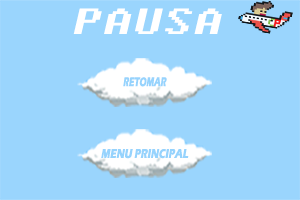
<style>
.page{position:relative;width:300px;height:200px;background:#9ad5fd}
.page>*{position:absolute;margin:0}
.t1{font:36.4px "Fixedsys";color:#ffffff;font-style:italic;scale:1.33 1}
.t2{font:13.1px "ErasITC-Bold";color:#96d3fd;font-style:italic;scale:0.62 1}
.t3{font:13.1px "ErasITC-Bold";color:#96d3fd;font-style:italic;scale:0.74 1}
</style>
<div class="page">
<p class="t1" style="left:73px;top:8px;width:149px;height:26px">PAUSA</p>
<p class="t2" style="left:123px;top:77px;width:44px;height:10px">RETOMAR</p>
<p class="t3" style="left:101px;top:149px;width:88px;height:10px">MENU PRINCIPAL</p>
</div>
